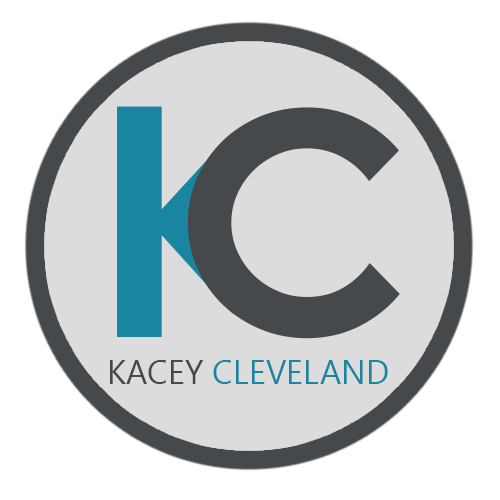
<style>
.page{position:relative;width:500px;height:500px;background:#dcdcdd}
.page>*{position:absolute;margin:0}
.t1{font:33.3px "LaoUI";color:#1985a1}
.t2{font:33.3px "LaoUI";color:#46494c}
</style>
<div class="page">
<p class="t1" style="left:110px;top:360px;width:278px;height:24px"><span class="t2">KACEY</span> CLEVELAND</p>
</div>
